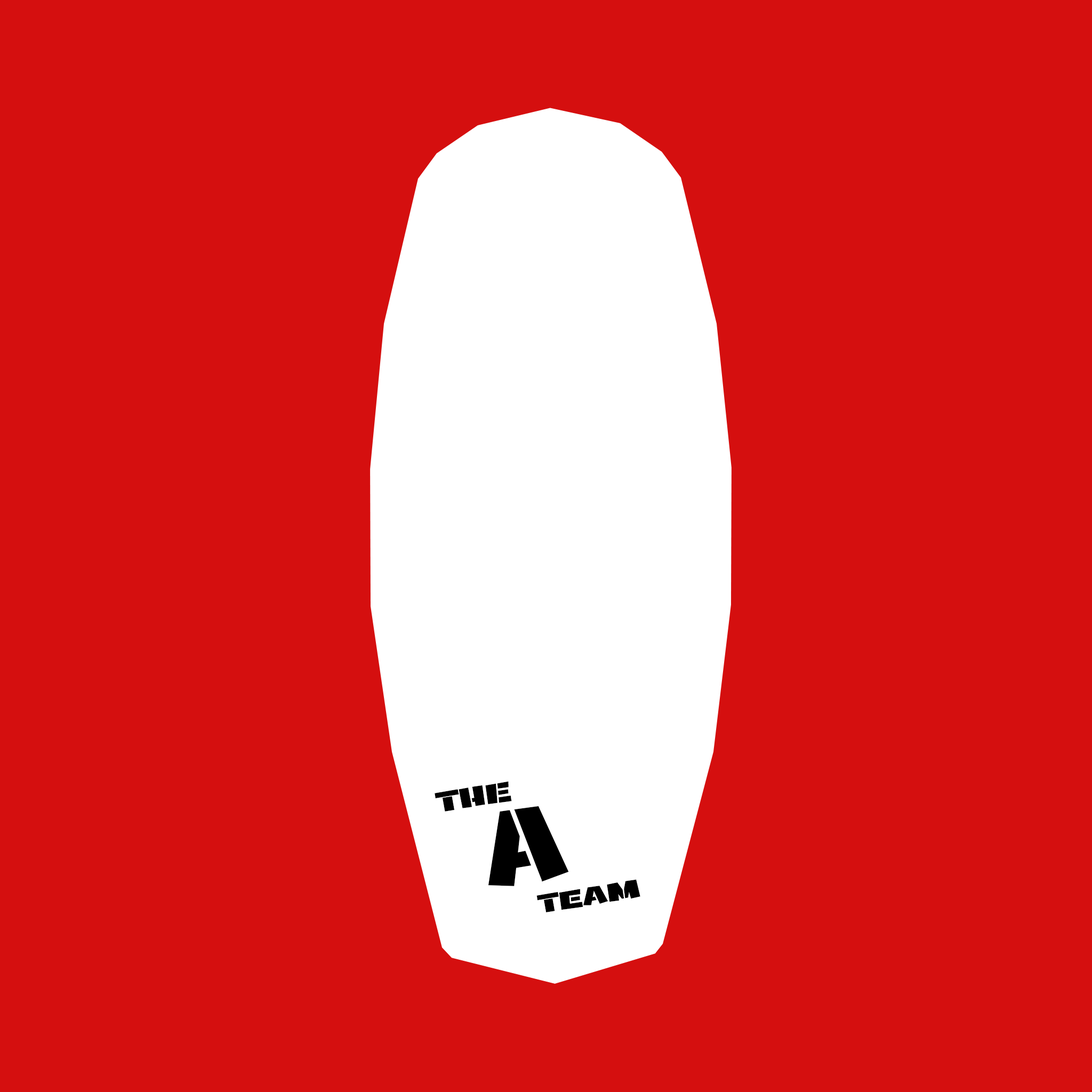
<style>
.page{position:relative;width:1092px;height:1092px;background:#d50f0f}
.page>*{position:absolute;margin:0}
.t1{font:28.3px "MilitaryKidRegular";letter-spacing:-0.02em;color:#010101;scale:1.85 1}
.t2{font:108.1px "MilitaryKidRegular";letter-spacing:-0.02em;color:#000000;scale:1.44 1}
.t3{font:25.8px "MilitaryKidRegular";letter-spacing:-0.02em;color:#000000;scale:1.85 1}
</style>
<div class="page">
<p class="t1" style="left:435px;top:781px;width:77px;height:31px;rotate:-9deg">THE</p>
<p class="t2" style="left:488px;top:806px;width:81px;height:80px;rotate:-9deg">A</p>
<p class="t3" style="left:536px;top:879px;width:104px;height:33px;rotate:-9deg">Team</p>
</div>
